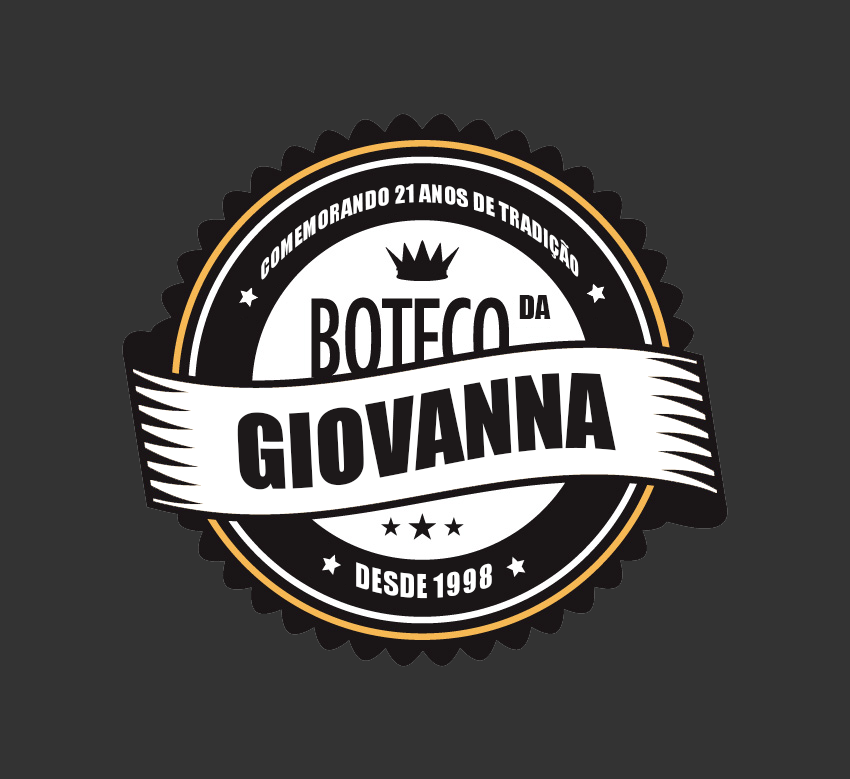
<style>
.page{position:relative;width:850px;height:779px;background:#333333}
.page>*{position:absolute;margin:0}
.t1{font:23px "Impact";color:#ffffff;scale:0.82 1}
.t2{font:30px "Impact";color:#1d191a}
.t3{font:95px "Impact";color:#1d191a}
.t4{font:30px "Impact";color:#ffffff}
</style>
<div class="page">
<p class="t1" style="left:261px;top:184px;width:318px;height:96px;text-align:center">COMEMORANDO 21 ANOS DE TRADIÇÃO</p>
<p class="t2" style="left:519px;top:295px;width:32px;height:24px">DA</p>
<p class="t3" style="left:237px;top:373px;width:379px;height:117px;rotate:-3deg">GIOVANNA</p>
<p class="t4" style="left:356px;top:562px;width:136px;height:37px">DESDE 1998</p>
</div>
